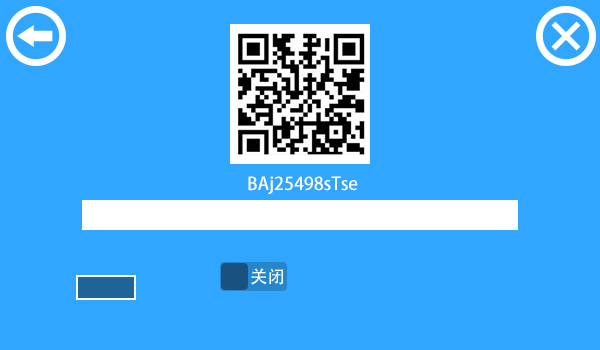
<style>
.page{position:relative;width:600px;height:350px;background:#30a6fe}
.page>*{position:absolute;margin:0}
.t1{font:17.6px "AdobeHeitiStd-Regular";color:#ffffff}
</style>
<div class="page">
<p class="t1" style="left:248px;top:176px;width:110px;height:19px">BAj25498sTse</p>
</div>
